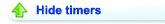
<style>
.page{position:relative;width:165px;height:24px;background:#ffffff}
.page>*{position:absolute;margin:0}
.t1{font:12px "Arial-BoldMT";color:#0531ff}
</style>
<div class="page">
<p class="t1" style="left:36px;top:5px;width:65px;height:10px">Hide timers</p>
</div>
